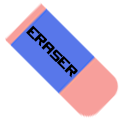
<style>
.page{position:relative;width:128px;height:128px;background:#ffffff}
.page>*{position:absolute;margin:0}
.t1{font:16px "SpaceMarine-Nominal";letter-spacing:-0.06em;color:#000000;scale:0.72 1}
</style>
<div class="page">
<p class="t1" style="left:26px;top:25px;width:52px;height:53px;rotate:45deg">Eraser</p>
</div>
